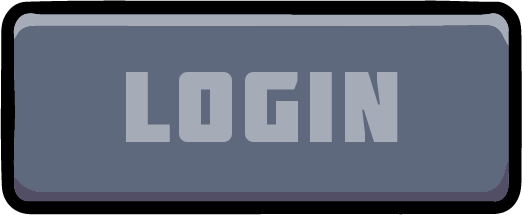
<style>
.page{position:relative;width:522px;height:215px;background:#5e697e}
.page>*{position:absolute;margin:0}
.t1{font:100px "Molot";letter-spacing:0.05em;color:#a5abb7}
</style>
<div class="page">
<p class="t1" style="left:126px;top:72px;width:272px;height:70px">LogIN</p>
</div>
